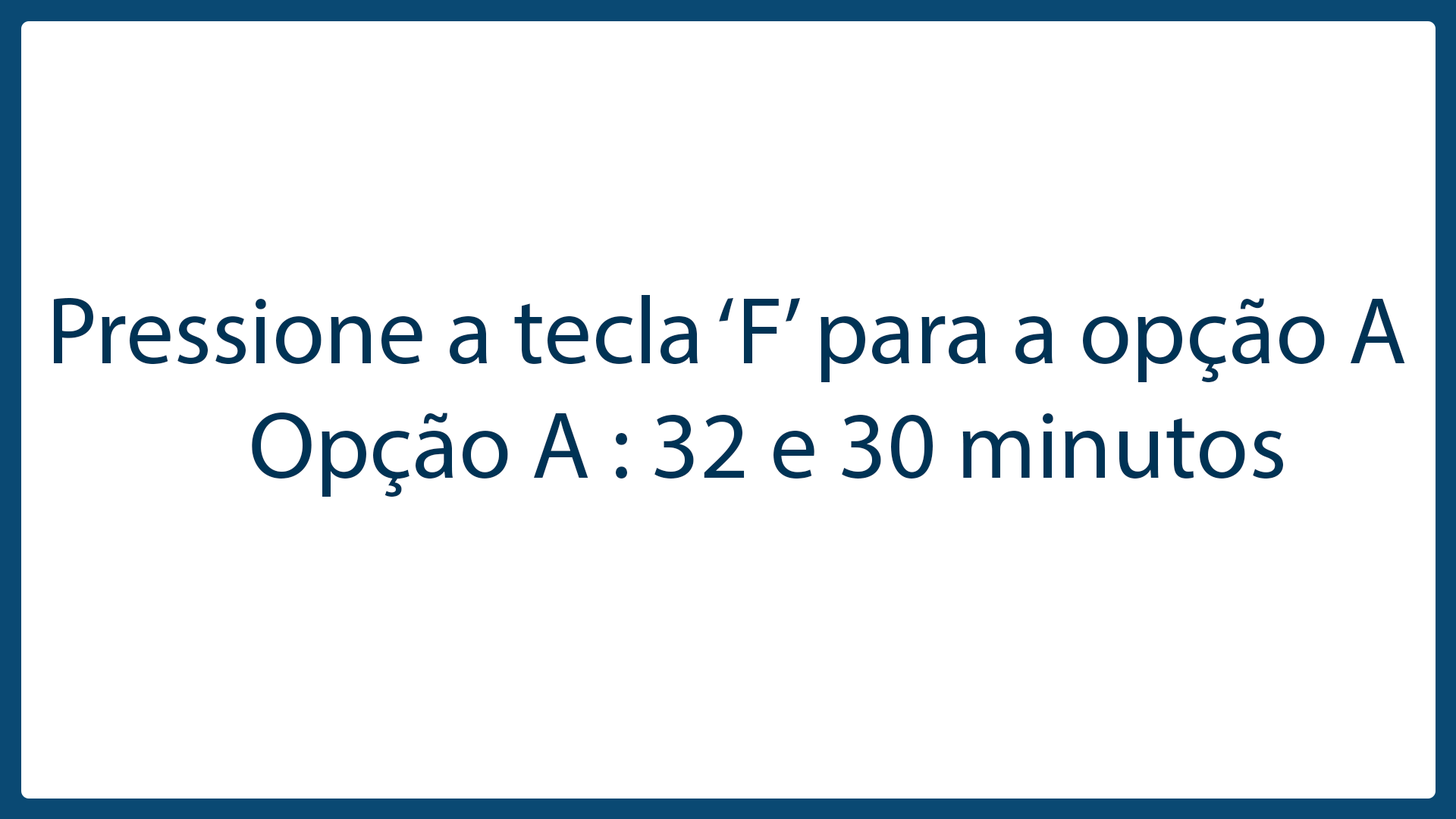
<style>
.page{position:relative;width:1456px;height:819px;background:#ffffff}
.page>*{position:absolute;margin:0}
.t1{font:95.9px "MyriadPro-Regular";color:#003355}
</style>
<div class="page">
<p class="t1" style="left:54px;top:295px;width:1351px;height:202px">Pressione a tecla ‘F’ para a opção A<br>          Opção A : 32 e 30 minutos</p>
</div>
